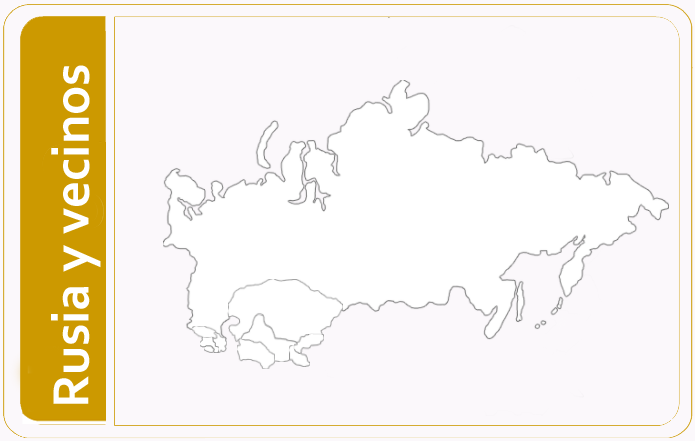
<style>
.page{position:relative;width:695px;height:441px;background:#fbf8fb}
.page>*{position:absolute;margin:0}
.t1{font:53px "Corbel-Bold";color:#ffffff}
</style>
<div class="page">
<p class="t1" style="left:51px;top:65px;width:50px;height:339px;rotate:-90deg">Rusia y vecinos</p>
</div>
